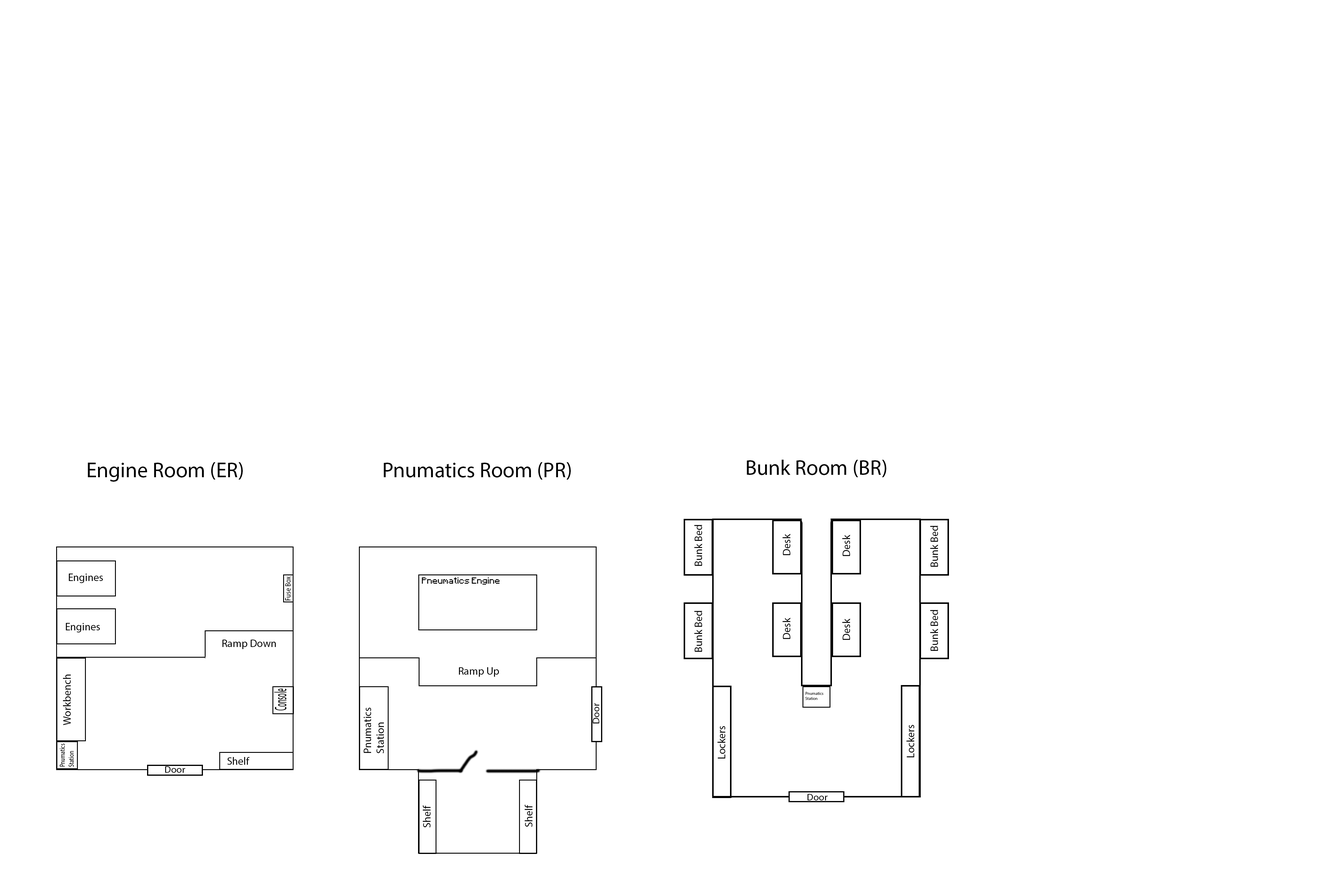
<style>
.page{position:relative;width:1337px;height:892px;background:#ffffff}
.page>*{position:absolute;margin:0}
.t1{font:21.4px "MyriadPro-Regular";color:#000000}
.t2{font:10.7px "MyriadPro-Regular";color:#000000}
.t3{font:7.6px "MyriadPro-Regular";color:#000000;scale:0.88 1}
.t4{font:7.1px "Minecraft";color:#000000}
.t5{font:16.7px "MyriadPro-Regular";color:#000000;scale:0.4 1}
.t6{font:4.2px "MyriadPro-Regular";color:#000000}
.t7{font:9.6px "MyriadPro-Regular";color:#000000;scale:1.05 1}
.t8{font:7.4px "MyriadPro-Regular";color:#000000;scale:0.73 1}
</style>
<div class="page">
<p class="t1" style="left:88px;top:462px;width:155px;height:19px">Engine Room (ER)</p>
<p class="t1" style="left:384px;top:462px;width:187px;height:17px">Pnumatics Room (PR)</p>
<p class="t1" style="left:747px;top:459px;width:140px;height:18px">Bunk Room (BR)</p>
<p class="t2" style="left:695px;top:525px;width:7px;height:41px;rotate:-90deg">Bunk Bed</p>
<p class="t2" style="left:783px;top:533px;width:8px;height:22px;rotate:-90deg">Desk</p>
<p class="t2" style="left:931px;top:525px;width:7px;height:41px;rotate:-90deg">Bunk Bed</p>
<p class="t2" style="left:843px;top:534px;width:7px;height:22px;rotate:-90deg">Desk</p>
<p class="t2" style="left:69px;top:573px;width:34px;height:10px">Engines</p>
<p class="t3" style="left:285px;top:576px;width:6px;height:24px;rotate:-90deg">Fuse Box</p>
<p class="t4" style="left:422px;top:577px;width:78px;height:7px">Pneumatics Engine</p>
<p class="t2" style="left:695px;top:610px;width:7px;height:41px;rotate:-90deg">Bunk Bed</p>
<p class="t2" style="left:783px;top:617px;width:8px;height:22px;rotate:-90deg">Desk</p>
<p class="t2" style="left:931px;top:610px;width:7px;height:41px;rotate:-90deg">Bunk Bed</p>
<p class="t2" style="left:66px;top:623px;width:34px;height:9px">Engines</p>
<p class="t2" style="left:843px;top:618px;width:7px;height:22px;rotate:-90deg">Desk</p>
<p class="t2" style="left:222px;top:639px;width:54px;height:10px">Ramp Down</p>
<p class="t2" style="left:63px;top:674px;width:8px;height:51px;rotate:-90deg">Workbench</p>
<p class="t2" style="left:459px;top:667px;width:40px;height:9px">Ramp Up</p>
<p class="t5" style="left:274px;top:688px;width:13px;height:22px;rotate:-90deg">Console</p>
<p class="t6" style="left:805px;top:692px;width:19px;height:8px">Pnumatics<br>Station</p>
<p class="t2" style="left:364px;top:707px;width:20px;height:46px;rotate:-90deg">Pnumatics<br>Station</p>
<p class="t7" style="left:593px;top:703px;width:6px;height:20px;rotate:-90deg">Door</p>
<p class="t2" style="left:718px;top:726px;width:7px;height:32px;rotate:-90deg">Lockers</p>
<p class="t2" style="left:907px;top:725px;width:7px;height:32px;rotate:-90deg">Lockers</p>
<p class="t8" style="left:60px;top:743px;width:14px;height:23px;rotate:-90deg">Pnumatics<br>Station</p>
<p class="t2" style="left:227px;top:757px;width:23px;height:7px">Shelf</p>
<p class="t7" style="left:165px;top:766px;width:20px;height:6px">Door</p>
<p class="t7" style="left:808px;top:794px;width:20px;height:6px">Door</p>
<p class="t2" style="left:423px;top:805px;width:8px;height:22px;rotate:-90deg">Shelf</p>
<p class="t2" style="left:525px;top:804px;width:8px;height:23px;rotate:-90deg">Shelf</p>
</div>
